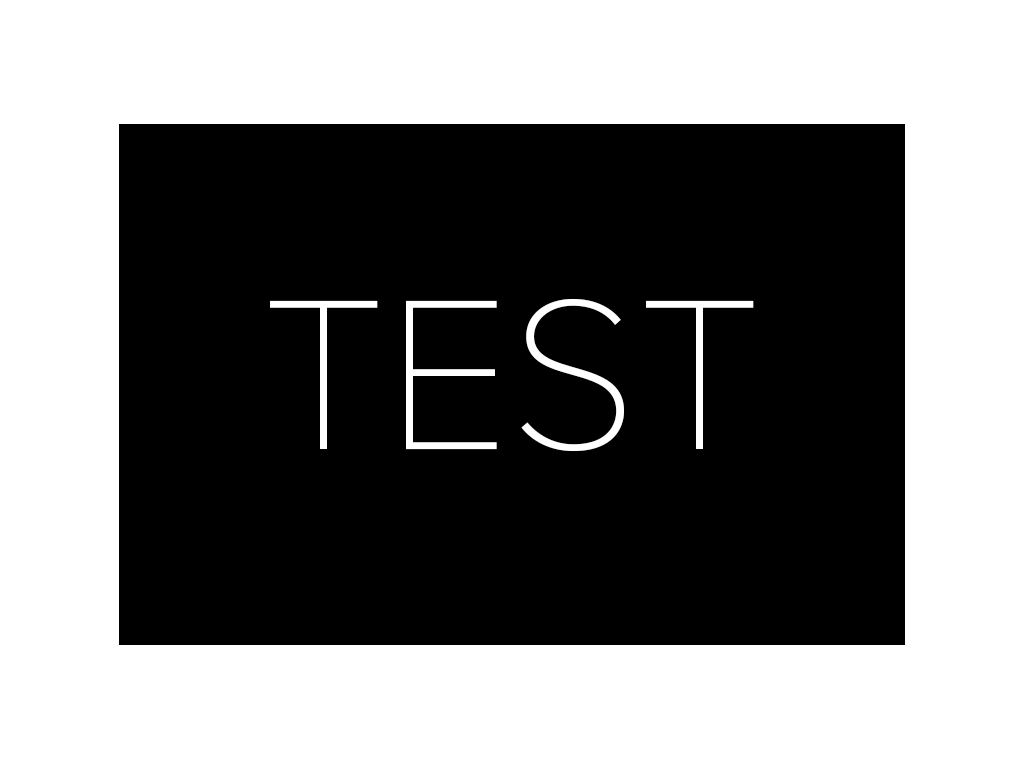
<style>
.page{position:relative;width:1024px;height:768px;background:#000000}
.page>*{position:absolute;margin:0}
.t1{font:222.1px "ProximaNova-Thin";color:#ffffff}
</style>
<div class="page">
<p class="t1" style="left:270px;top:298px;width:484px;height:154px">TEST</p>
</div>
